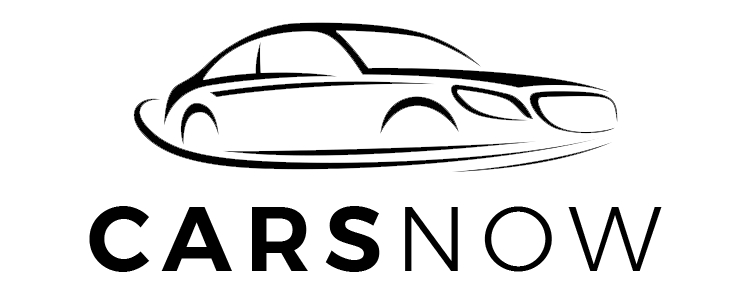
<style>
.page{position:relative;width:750px;height:294px;background:#ffffff}
.page>*{position:absolute;margin:0}
.t1{font:91.7px "Montserrat-SemiBold";letter-spacing:0.14em;color:#000000}
.t2{font:91.7px "Montserrat-Light";letter-spacing:0.14em;color:#000000}
</style>
<div class="page">
<p class="t1" style="left:89px;top:206px;width:573px;height:66px">CARS<span class="t2">NOW</span></p>
</div>
